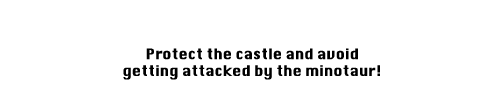
<style>
.page{position:relative;width:500px;height:100px;background:#ffffff}
.page>*{position:absolute;margin:0}
.t1{font:14px "Krungthep";color:#000000}
</style>
<div class="page">
<p class="t1" style="left:123px;top:48px;width:257px;height:32px;text-align:center">Protect the castle and avoid<br>getting attacked by the minotaur!</p>
</div>
